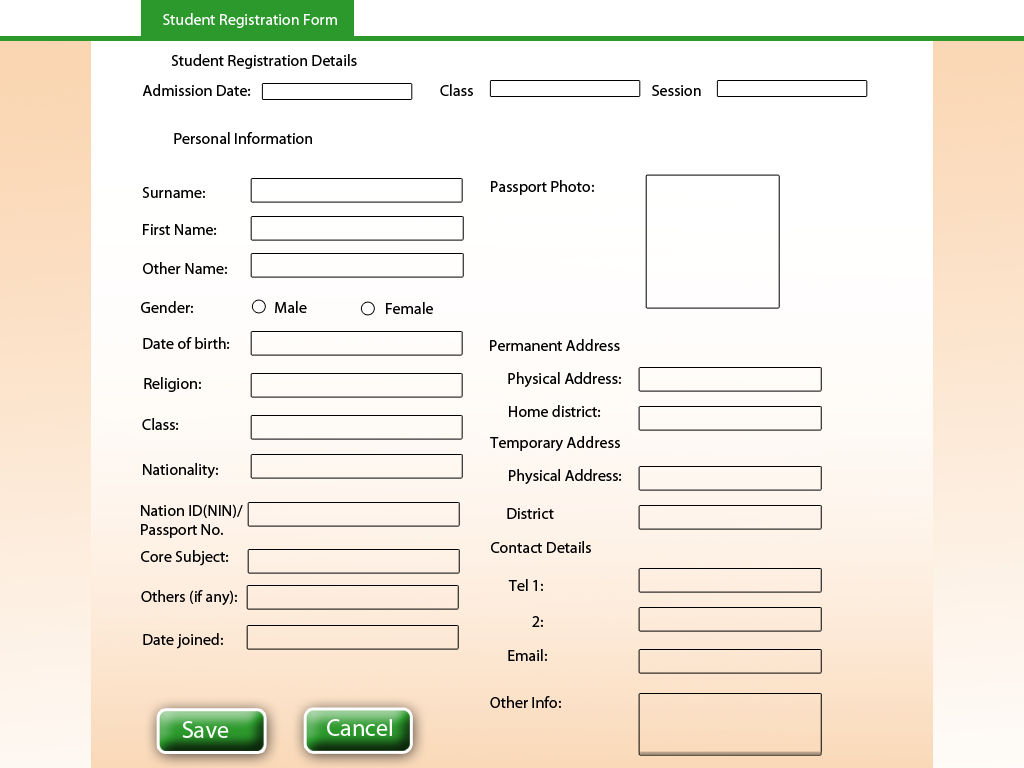
<style>
.page{position:relative;width:1024px;height:768px;background:#ffffff}
.page>*{position:absolute;margin:0}
.t1{font:16px "MyriadPro-Regular";color:#ffffff}
.t2{font:16px "MyriadPro-Regular";color:#000000}
.t3{font:24px "MyriadPro-Regular";color:#ffffff}
</style>
<div class="page">
<p class="t1" style="left:163px;top:13px;width:174px;height:15px">Student Registration Form</p>
<p class="t2" style="left:171px;top:54px;width:186px;height:15px">Student Registration Details</p>
<p class="t2" style="left:142px;top:84px;width:109px;height:12px">Admission Date:</p>
<p class="t2" style="left:440px;top:84px;width:33px;height:12px">Class</p>
<p class="t2" style="left:652px;top:85px;width:49px;height:11px">Session</p>
<p class="t2" style="left:174px;top:132px;width:138px;height:12px">Personal Information</p>
<p class="t2" style="left:491px;top:180px;width:103px;height:15px">Passport Photo:</p>
<p class="t2" style="left:142px;top:187px;width:63px;height:11px">Surname:</p>
<p class="t2" style="left:143px;top:224px;width:74px;height:11px">First Name:</p>
<p class="t2" style="left:143px;top:262px;width:84px;height:12px">Other Name:</p>
<p class="t2" style="left:141px;top:301px;width:52px;height:12px">Gender:</p>
<p class="t2" style="left:275px;top:301px;width:32px;height:12px">Male</p>
<p class="t2" style="left:386px;top:302px;width:47px;height:12px">Female</p>
<p class="t2" style="left:143px;top:337px;width:87px;height:12px">Date of birth:</p>
<p class="t2" style="left:490px;top:339px;width:130px;height:12px">Permanent Address</p>
<p class="t2" style="left:144px;top:377px;width:57px;height:15px">Religion:</p>
<p class="t2" style="left:508px;top:372px;width:113px;height:16px">Physical Address:</p>
<p class="t2" style="left:509px;top:405px;width:92px;height:12px">Home district:</p>
<p class="t2" style="left:142px;top:418px;width:37px;height:12px">Class:</p>
<p class="t2" style="left:490px;top:436px;width:130px;height:16px">Temporary Address</p>
<p class="t2" style="left:143px;top:463px;width:75px;height:16px">Nationality:</p>
<p class="t2" style="left:509px;top:469px;width:113px;height:15px">Physical Address:</p>
<p class="t2" style="left:141px;top:504px;width:102px;height:34px">Nation ID(NIN)/<br>Passport No.</p>
<p class="t2" style="left:507px;top:508px;width:47px;height:11px">District</p>
<p class="t2" style="left:491px;top:541px;width:100px;height:12px">Contact Details</p>
<p class="t2" style="left:141px;top:550px;width:88px;height:16px">Core Subject:</p>
<p class="t2" style="left:508px;top:579px;width:35px;height:12px">Tel 1:</p>
<p class="t2" style="left:141px;top:590px;width:96px;height:15px">Others (if any):</p>
<p class="t2" style="left:532px;top:616px;width:11px;height:11px">2:</p>
<p class="t2" style="left:143px;top:633px;width:80px;height:16px">Date joined:</p>
<p class="t2" style="left:508px;top:649px;width:39px;height:12px">Email:</p>
<p class="t2" style="left:490px;top:696px;width:71px;height:12px">Other Info:</p>
<p class="t3" style="left:182px;top:721px;width:47px;height:17px">Save</p>
<p class="t3" style="left:327px;top:719px;width:65px;height:17px">Cancel</p>
</div>
